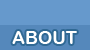
<style>
.page{position:relative;width:90px;height:50px;background:#6699cc}
.page>*{position:absolute;margin:0}
.t1{font:18px "ArialRoundedMTBold";color:#ffffff}
</style>
<div class="page">
<p class="t1" style="left:12px;top:31px;width:65px;height:13px">ABOUT</p>
</div>
